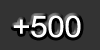
<style>
.page{position:relative;width:100px;height:50px;background:#333333}
.page>*{position:absolute;margin:0}
.t1{font:29.6px "ArialMT";letter-spacing:-0.015em;color:#ffffff;scale:1.07 1}
</style>
<div class="page">
<p class="t1" style="left:13px;top:15px;width:68px;height:23px">+500</p>
</div>
